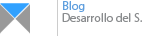
<style>
.page{position:relative;width:160px;height:36px;background:#ffffff}
.page>*{position:absolute;margin:0}
.t1{font:12px "MyriadPro-Regular";color:#609fde}
.t2{font:12px "MyriadPro-Regular";color:#8a8c8e}
</style>
<div class="page">
<p class="t1" style="left:63px;top:1px;width:22px;height:11px">Blog</p>
<p class="t2" style="left:62px;top:13px;width:80px;height:9px">Desarrollo del S.</p>
</div>
